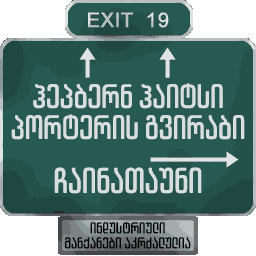
<style>
.page{position:relative;width:256px;height:256px;background:#275a52}
.page>*{position:absolute;margin:0}
.t1{font:34px "ArchyEDT-Bold";color:#d8dedd;scale:0.9 1}
.t2{font:36px "ArchyEDT-Bold";color:#d8dedd;scale:0.9 1}
.t3{font:16px/15px "ArchyEDT-Bold";color:#000000;scale:0.9 1}
</style>
<div class="page">
<p class="t1" style="left:33px;top:83px;width:190px;height:26px">ჰეპბერნ ჰაიტსი</p>
<p class="t1" style="left:11px;top:114px;width:234px;height:26px">პორტერის გვირაბი</p>
<p class="t2" style="left:54px;top:167px;width:148px;height:27px">ჩაინათაუნი</p>
<p class="t3" style="left:65px;top:222px;width:126px;height:27px;text-align:center">ინდუსტრიული<br>მანქანები აკრძალულია</p>
</div>
